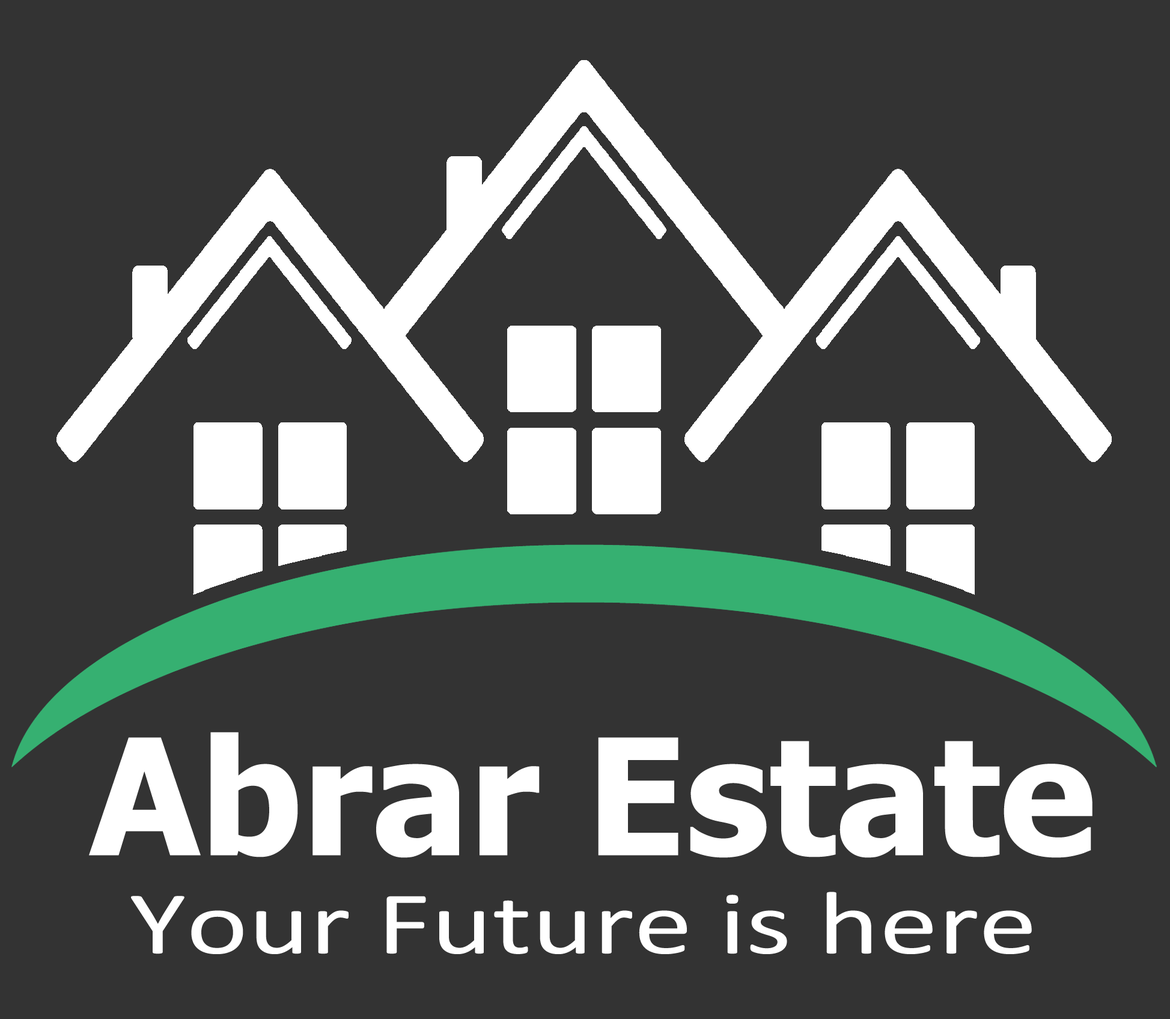
<style>
.page{position:relative;width:1170px;height:1019px;background:#333333}
.page>*{position:absolute;margin:0}
.t1{font:161.6px "Tahoma-Bold";color:#ffffff}
.t2{font:90.1px "Calibri";color:#ffffff;scale:1.3 1}
</style>
<div class="page">
<p class="t1" style="left:89px;top:732px;width:1003px;height:126px">Abrar Estate</p>
<p class="t2" style="left:131px;top:892px;width:901px;height:62px">Your Future is here</p>
</div>
